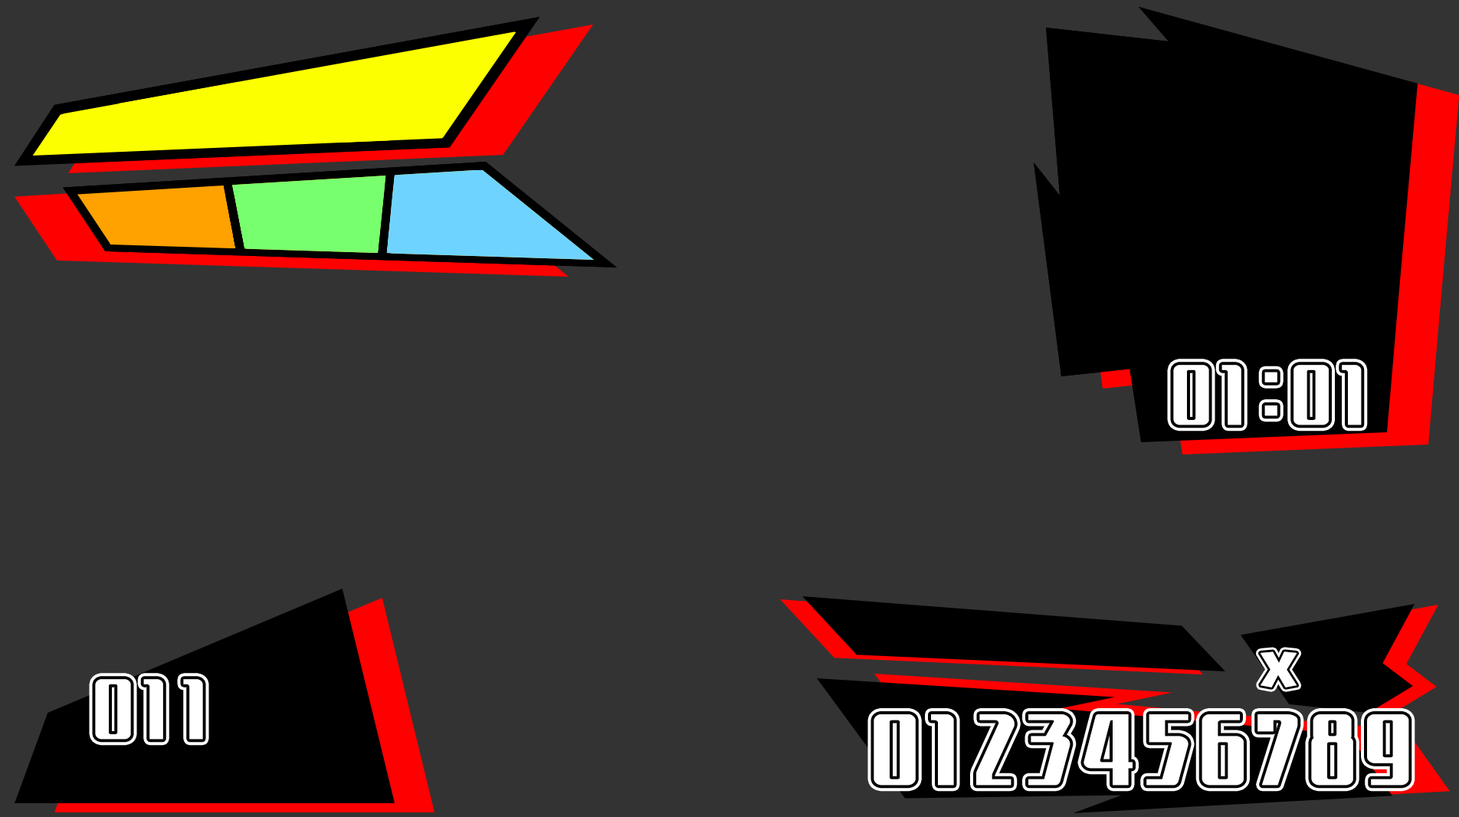
<style>
.page{position:relative;width:1459px;height:817px;background:#333333}
.page>*{position:absolute;margin:0}
.t1{font:75.9px "ParNum2016";letter-spacing:0.05em;color:#ffffff;scale:1.22 1}
.t2{font:75.9px "BIZ-UDPGothic";letter-spacing:0.05em;color:#ffffff;scale:1.22 1}
.t3{font:36.8px "GN-KMBFont-UB-OldstyleKana";letter-spacing:0.05em;color:#ffffff;scale:1.1 1}
.t4{font:89.7px "ParNum2016";letter-spacing:0.05em;color:#ffffff;scale:1.22 1}
</style>
<div class="page">
<p class="t1" style="left:1173px;top:365px;width:189px;height:60px">01<span class="t2">:</span>01</p>
<p class="t3" style="left:1260px;top:652px;width:38px;height:36px">X</p>
<p class="t1" style="left:95px;top:679px;width:108px;height:61px">011</p>
<p class="t4" style="left:874px;top:714px;width:536px;height:72px">0123456789</p>
</div>
